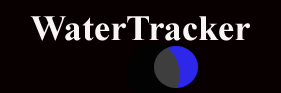
<style>
.page{position:relative;width:281px;height:93px;background:#080000}
.page>*{position:absolute;margin:0}
.t1{font:36px "TimesNewRomanPS-BoldMT";color:#f9f5f5}
</style>
<div class="page">
<p class="t1" style="left:30px;top:16px;width:220px;height:25px">WaterTracker</p>
</div>
